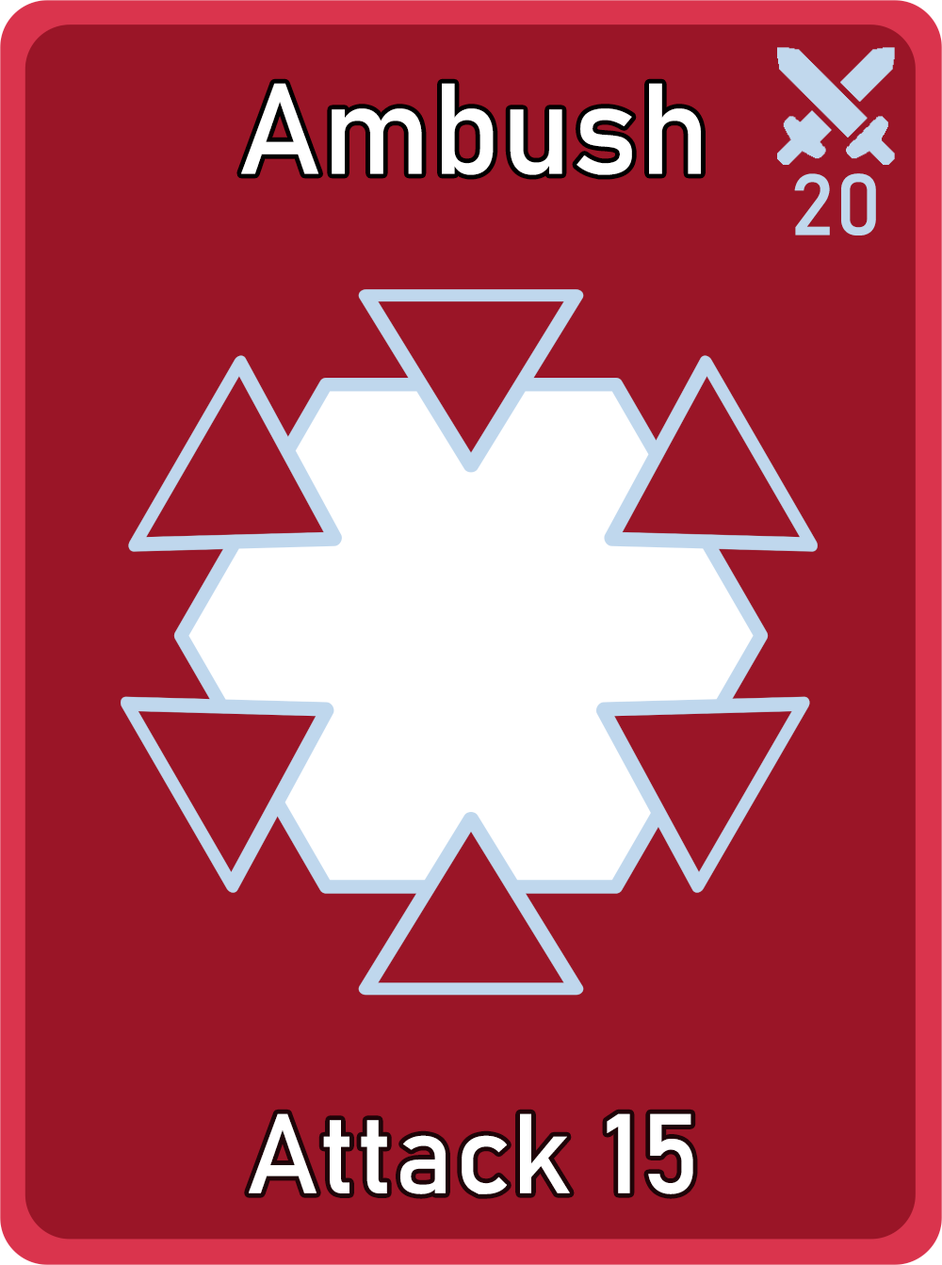
<style>
.page{position:relative;width:942px;height:1265px;background:#9a1527}
.page>*{position:absolute;margin:0}
.t1{font:126.7px "Bahnschrift";letter-spacing:0.01em;color:#ffffff}
.t2{font:85px "Bahnschrift";letter-spacing:0.01em;color:#c1d8ed}
.t3{font:111.3px "Bahnschrift";letter-spacing:0.01em;color:#ffffff}
</style>
<div class="page">
<p class="t1" style="left:241px;top:83px;width:460px;height:92px">Ambush</p>
<p class="t2" style="left:794px;top:173px;width:82px;height:63px">20</p>
<p class="t3" style="left:249px;top:1114px;width:445px;height:81px">Attack 15</p>
</div>
